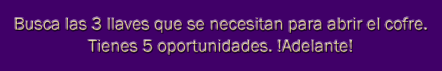
<style>
.page{position:relative;width:442px;height:71px;background:#400068}
.page>*{position:absolute;margin:0}
.t1{font:18px/22.2px "FranklinGothic-Book";color:#d4c088}
</style>
<div class="page">
<p class="t1" style="left:15px;top:17px;width:412px;height:38px;text-align:center">Busca las 3 llaves que se necesitan para abrir el cofre. Tienes 5 oportunidades. !Adelante!</p>
</div>
